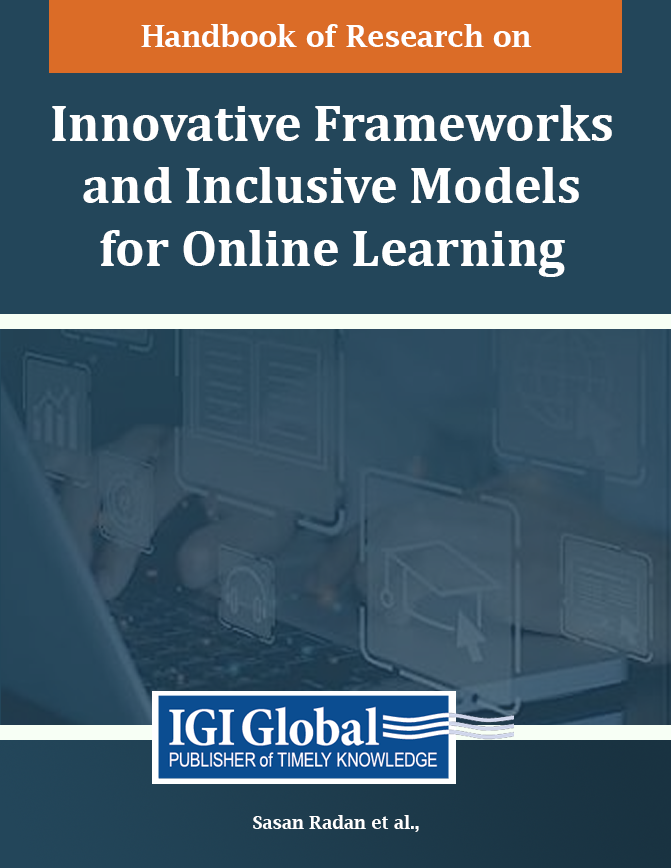
<style>
.page{position:relative;width:671px;height:868px;background:#23465a}
.page>*{position:absolute;margin:0}
.t1{font:30px "LucidaBright-Demi";color:#ffffff}
.t2{font:52px "Cambria-Bold";color:#ffffff}
.t3{font:18px "LucidaBright-Demi";color:#ffffff}
</style>
<div class="page">
<p class="t1" style="left:141px;top:24px;width:391px;height:23px">Handbook of Research on</p>
<p class="t2" style="left:52px;top:105px;width:560px;height:172px;text-align:center">Innovative Frameworks <br>and Inclusive Models <br>for Online Learning</p>
<p class="t3" style="left:253px;top:815px;width:166px;height:17px">Sasan Radan et al.,</p>
</div>
